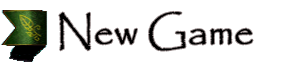
<style>
.page{position:relative;width:300px;height:70px;background:#ffffff}
.page>*{position:absolute;margin:0}
.t1{font:40px "Papyrus-Regular";color:#000000}
</style>
<div class="page">
<p class="t1" style="left:59px;top:11px;width:194px;height:40px">New Game</p>
</div>
